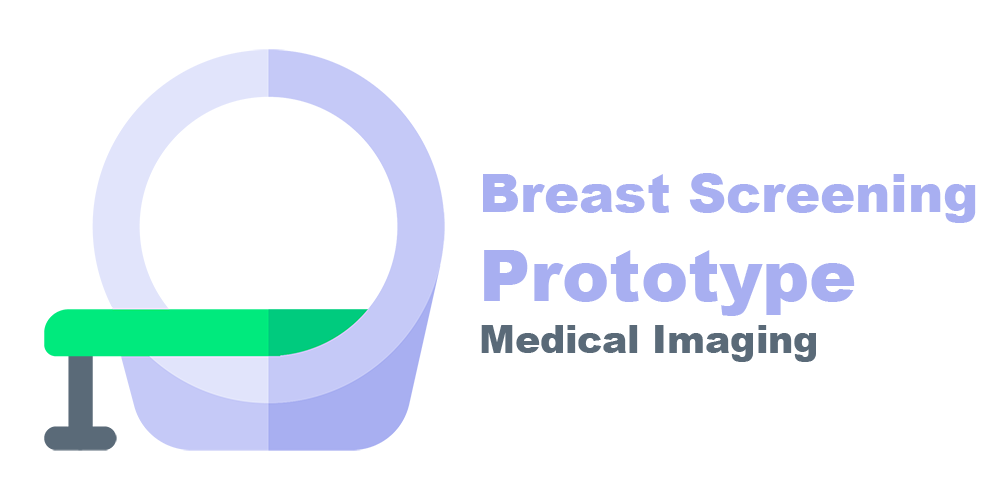
<style>
.page{position:relative;width:1000px;height:500px;background:#ffffff}
.page>*{position:absolute;margin:0}
.t1{font:52.7px "Arial-Black";color:#a8aff1}
.t2{font:70.5px "Arial-Black";color:#a8aff1}
.t3{font:37.6px "Arial-Black";color:#5a6a78}
</style>
<div class="page">
<p class="t1" style="left:483px;top:173px;width:493px;height:50px">Breast Screening</p>
<p class="t2" style="left:484px;top:250px;width:371px;height:66px">Prototype</p>
<p class="t3" style="left:481px;top:325px;width:335px;height:37px">Medical Imaging</p>
</div>
